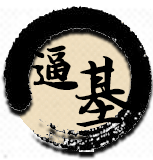
<style>
.page{position:relative;width:153px;height:160px;background:#000000}
.page>*{position:absolute;margin:0}
.t1{font:59.6px "SCFwxz";color:#000000;font-weight:bold;scale:0.97 1}
.t2{font:78px "SCFwxz";color:#000000;font-weight:bold}
</style>
<div class="page">
<p class="t1" style="left:29px;top:45px;width:50px;height:45px">逼</p>
<p class="t2" style="left:75px;top:56px;width:63px;height:71px">基</p>
</div>
